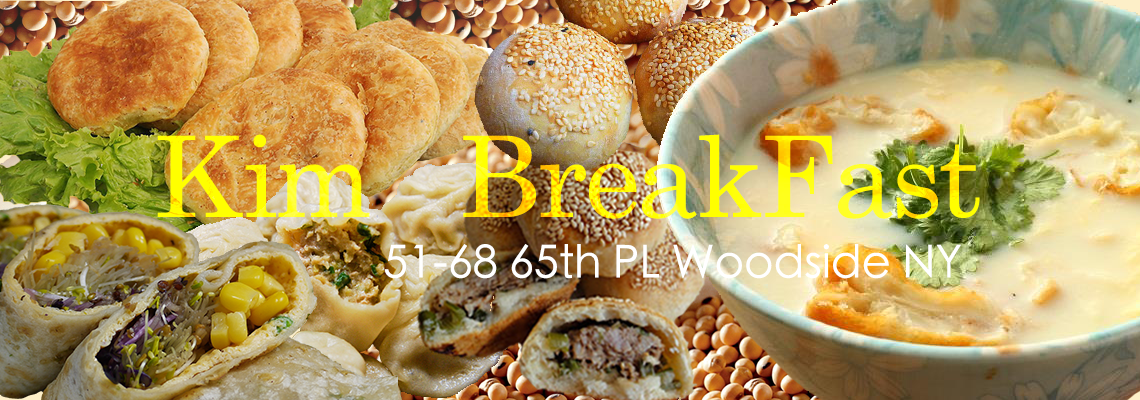
<style>
.page{position:relative;width:1140px;height:400px}
.page>*{position:absolute;margin:0}
.t1{font:112.5px "AppleMyungjo"}
.t2{font:45px "STHeitiTC-Light";color:#ffffff}
</style>
<div class="page">
<p class="t1" style="left:157px;top:134px;width:823px;height:85px">Kim  BreakFast</p>
<p class="t2" style="left:384px;top:244px;width:577px;height:35px">51-68 65th PL Woodside NY</p>
</div>
